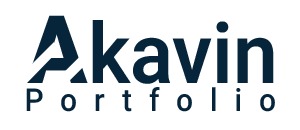
<style>
.page{position:relative;width:300px;height:130px;background:#ffffff}
.page>*{position:absolute;margin:0}
.t1{font:84px "Roboto-SemiBold";color:#06243a;scale:0.95 1}
.t2{font:94.5px "Roboto-Black";color:#06243a;scale:0.95 1}
.t3{font:31.5px "Roboto-Medium";letter-spacing:0.56em;color:#06243a;scale:0.95 1}
</style>
<div class="page">
<p class="t1" style="left:26px;top:15px;width:248px;height:69px"><span class="t2">A</span>kavin</p>
<p class="t3" style="left:26px;top:87px;width:249px;height:25px">Portfolio</p>
</div>
